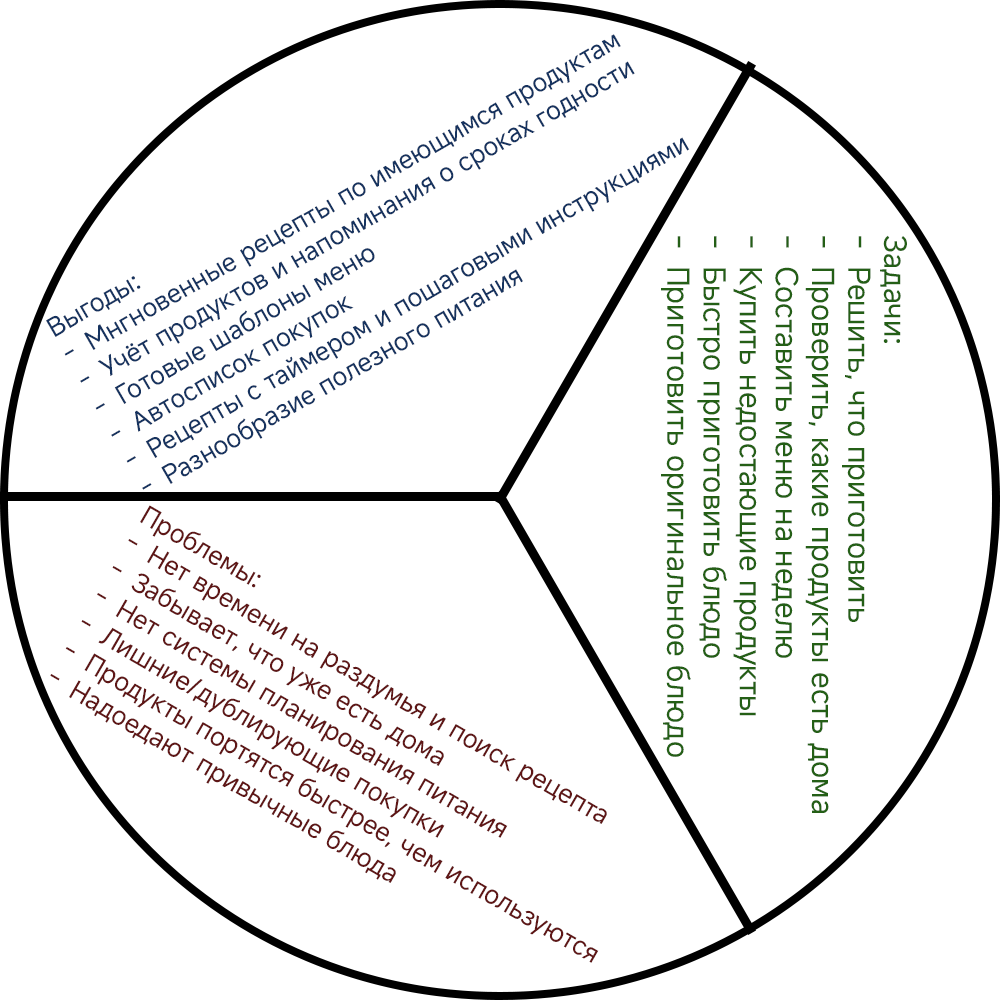
<style>
.page{position:relative;width:1000px;height:1000px;background:#ffffff}
.page>*{position:absolute;margin:0}
.t1{font:25.8px "MiSansLatin-Regular";color:#16335f}
.t2{font:30.1px "MiSansLatin-Regular";color:#245f16}
.t3{font:26px "MiSansLatin-Regular";color:#5f1616}
</style>
<div class="page">
<p class="t1" style="left:46px;top:34px;width:644px;height:456px;rotate:-30deg">Выгоды:<br>Мнгновенные рецепты по имеющимся продуктам<br>Учёт продуктов и напоминания о сроках годности<br>Готовые шаблоны меню<br>Автосписок покупок<br>Рецепты с таймером и пошаговыми инструкциями<br>Разнообразие полезного питания</p>
<p class="t2" style="left:661px;top:235px;width:246px;height:578px;rotate:90deg">Задачи:<br>Решить, что приготовить<br>Проверить, какие продукты есть дома<br>Составить меню на неделю<br>Купить недостающие продукты<br>Быстро приготовить блюдо<br>Приготовить оригинальное блюдо</p>
<p class="t3" style="left:50px;top:505px;width:557px;height:458px;rotate:30deg">Проблемы:<br>Нет времени на раздумья и поиск рецепта<br>Забывает, что уже есть дома<br>Нет системы планирования питания<br>Лишние/дублирующие покупки<br>Продукты портятся быстрее, чем используются<br>Надоедают привычные блюда</p>
</div>
